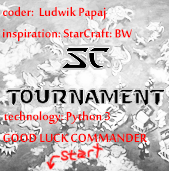
<style>
.page{position:relative;width:169px;height:171px}
.page>*{position:absolute;margin:0}
.t1{font:18px "MoolBoran";color:#ff0000}
</style>
<div class="page">
<p class="t1" style="left:3px;top:6px;width:129px;height:36px;text-align:center">coder:  Ludwik Papaj           <br>inspiration: StarCraft: BW</p>
<p class="t1" style="left:3px;top:111px;width:144px;height:31px;text-align:center">technology: Python 3               <br>GOOD LUCK COMMANDER</p>
</div>
